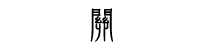
<style>
.page{position:relative;width:200px;height:50px;background:#ffffff}
.page>*{position:absolute;margin:0}
.t1{font:36px "DFJinWen-W3-WIN-BF";color:#000000;font-weight:bold}
</style>
<div class="page">
<p class="t1" style="left:90px;top:8px;width:23px;height:34px">關</p>
</div>
